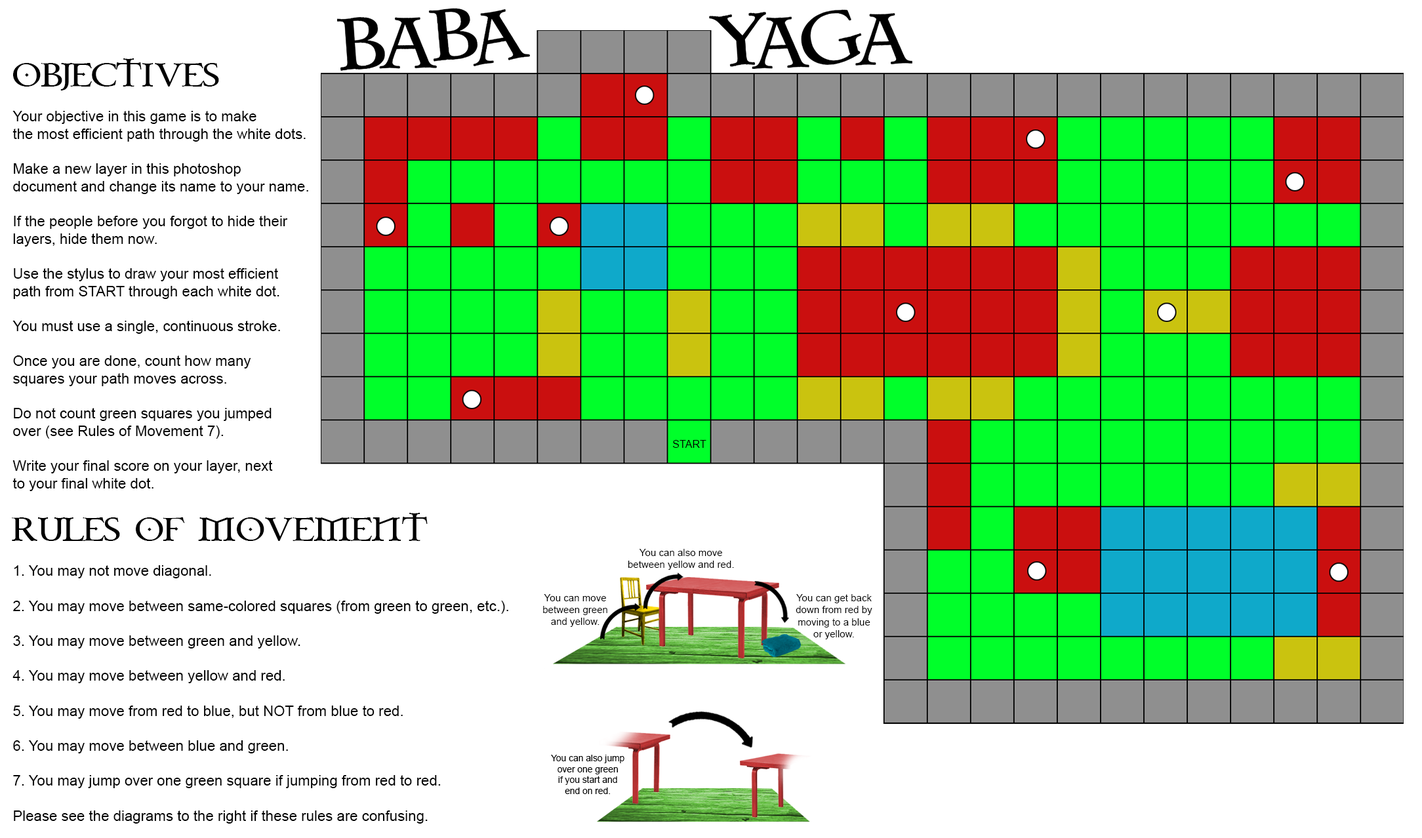
<style>
.page{position:relative;width:1422px;height:838px;background:#ffffff}
.page>*{position:absolute;margin:0}
.t1{font:14.6px "ArialMT";color:#000000}
.t2{font:29.2px "CelticGaramondthe2nd";color:#000000}
.t3{font:10.6px "ArialMT";color:#000000}
.t4{font:9.9px "ArialMT";color:#000000}
.t5{font:9.1px "ArialMT";color:#000000}
</style>
<div class="page">
<p class="t1" style="left:12px;top:58px;width:496px;height:766px"><span class="t2">OBJECTIVES<br></span><br>Your objective in this game is to make<br>the most efficient path through the white dots.<br><br>Make a new layer in this photoshop<br>document and change its name to your name.<br><br>If the people before you forgot to hide their<br>layers, hide them now.<br><br>Use the stylus to draw your most efficient<br>path from START through each white dot.<br><br>You must use a single, continuous stroke.<br><br>Once you are done, count how many<br>squares your path moves across.<br><br>Do not count green squares you jumped<br>over (see Rules of Movement 7).<br><br>Write your final score on your layer, next<br>to your final white dot.<br><br><span class="t2">RULES OF MOVEMENT<br></span><br>1. You may not move diagonal.<br><br>2. You may move between same-colored squares (from green to green, etc.).<br><br>3. You may move between green and yellow.<br><br>4. You may move between yellow and red.<br><br>5. You may move from red to blue, but NOT from blue to red.<br><br>6. You may move between blue and green.<br><br>7. You may jump over one green square if jumping from red to red.<br><br>Please see the diagrams to the right if these rules are confusing.</p>
<p class="t3" style="left:673px;top:440px;width:34px;height:8px">START</p>
<p class="t4" style="left:628px;top:549px;width:106px;height:21px;text-align:center">You can also move<br>between yellow and red.</p>
<p class="t4" style="left:543px;top:594px;width:64px;height:33px;text-align:center">You can move<br>between green<br>and yellow.</p>
<p class="t4" style="left:796px;top:594px;width:77px;height:46px;text-align:center">You can get back<br>down from red by<br>moving to a blue<br>or yellow.</p>
<p class="t5" style="left:551px;top:755px;width:74px;height:39px;text-align:center">You can also jump<br>over one green<br>if you start and<br>end on red.</p>
</div>
